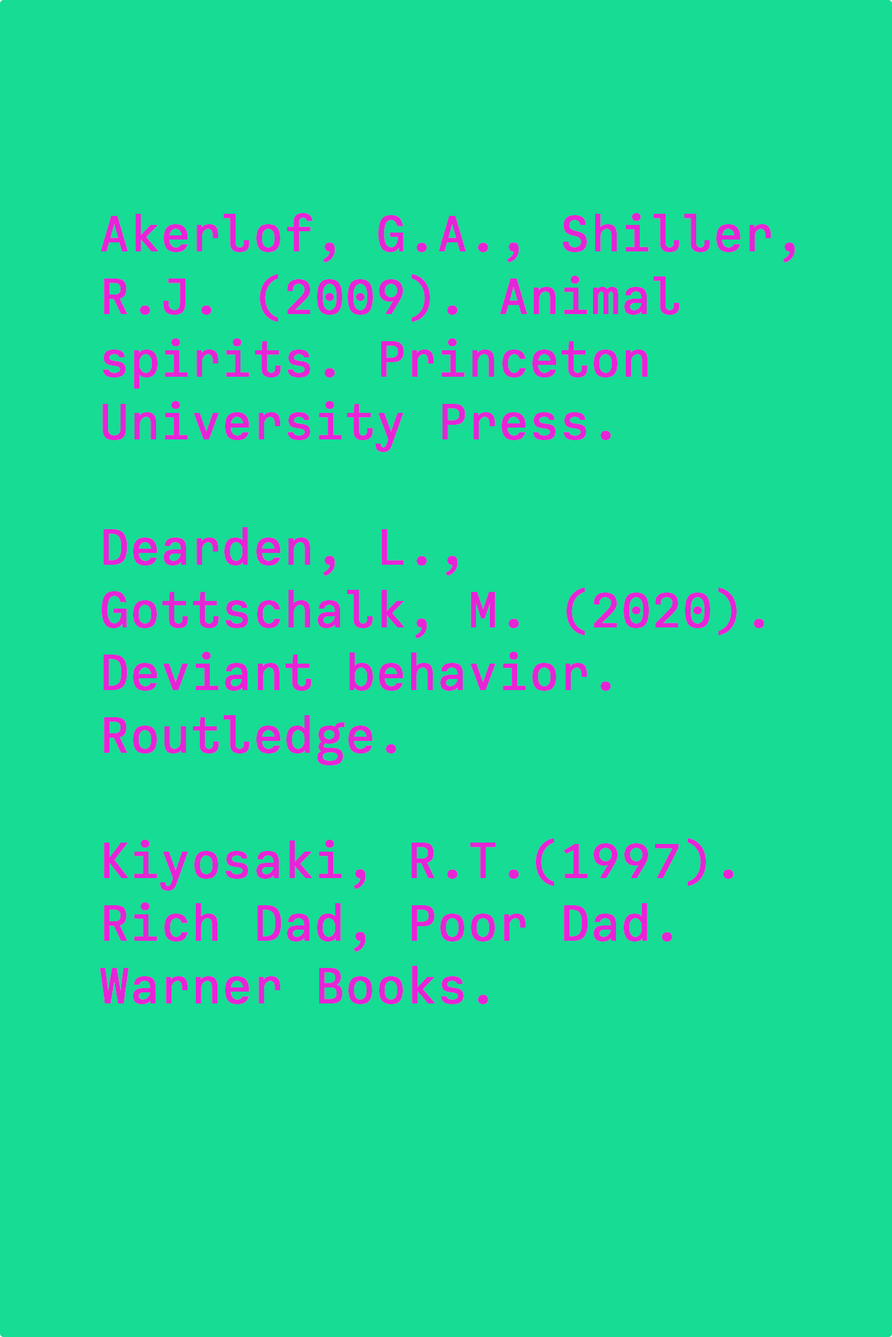
<style>
.page{position:relative;width:892px;height:1337px;background:#16dc94}
.page>*{position:absolute;margin:0}
.t1{font:52.2px "CallingCode-Regular";color:#e624d6;font-weight:bold}
</style>
<div class="page">
<p class="t1" style="left:100px;top:213px;width:695px;height:791px">Akerlof, G.A., Shiller, R.J. (2009). Animal spirits. Princeton University Press.<br><br>Dearden, L., Gottschalk, M. (2020). Deviant behavior. Routledge.<br><br>Kiyosaki, R.T.(1997). Rich Dad, Poor Dad. Warner Books.</p>
</div>
